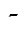
<style>
.page{position:relative;width:26px;height:30px;background:#ffffff}
.page>*{position:absolute;margin:0}
.t1{font:33.3px "Luminari-Regular";color:#020202}
</style>
<div class="page">
<p class="t1" style="left:8px;top:14px;width:10px;height:3px">-</p>
</div>
